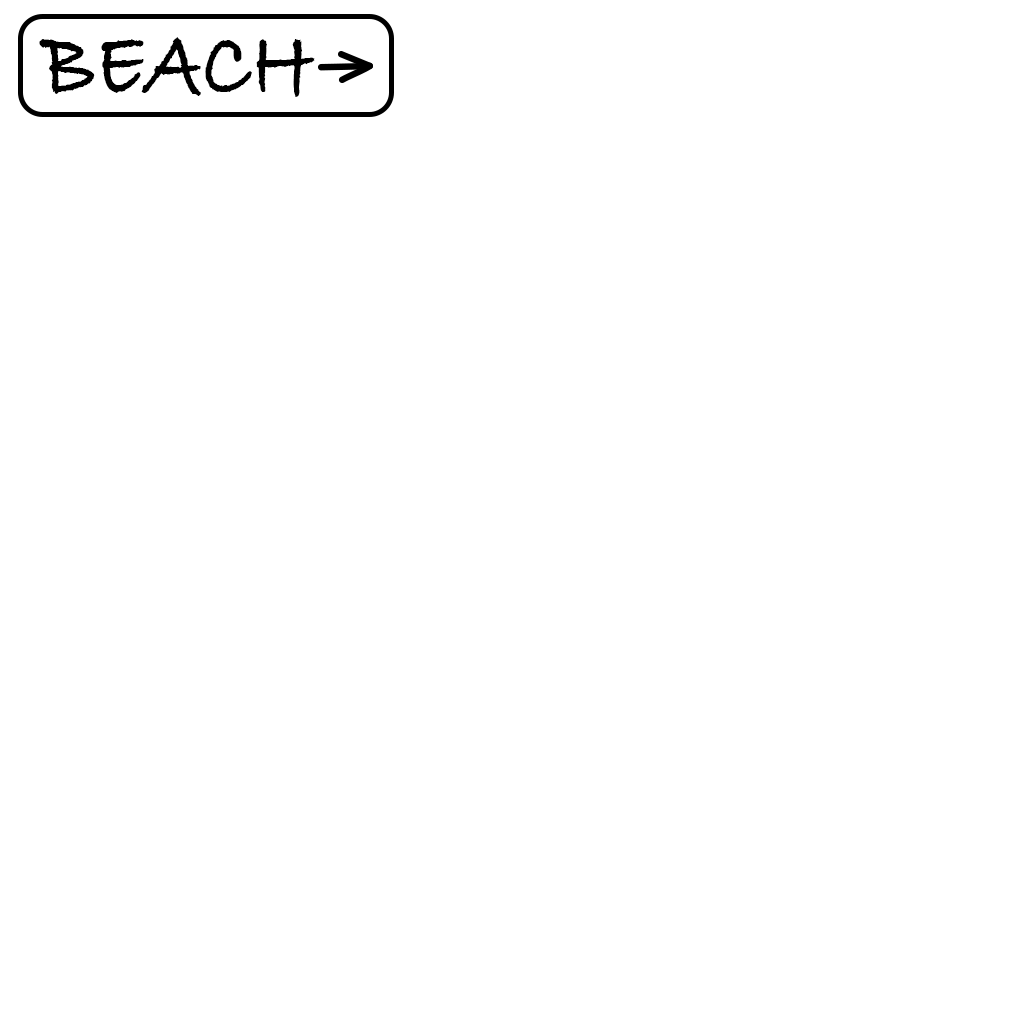
<style>
.page{position:relative;width:1024px;height:1024px;background:#ffffff}
.page>*{position:absolute;margin:0}
.t1{font:95.9px "BradleyHandITCTT-Bold";color:#000000;scale:0.82 1}
</style>
<div class="page">
<p class="t1" style="left:39px;top:37px;width:276px;height:60px">BEACH</p>
</div>
